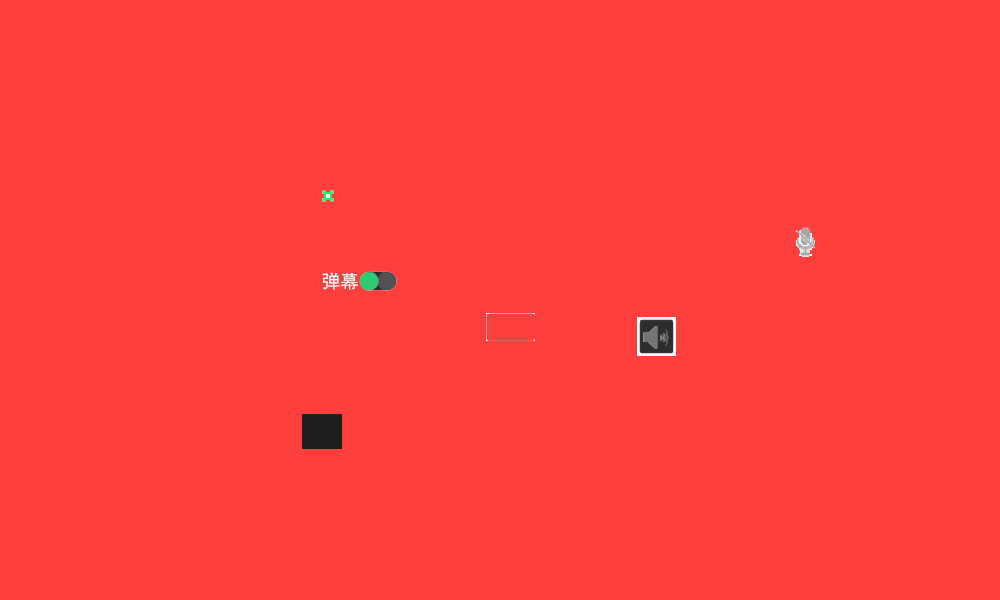
<style>
.page{position:relative;width:1000px;height:600px;background:#ff3e3e}
.page>*{position:absolute;margin:0}
.t1{font:18.7px "SimHei";color:#ffffff}
</style>
<div class="page">
<p class="t1" style="left:322px;top:272px;width:37px;height:18px">弹幕</p>
</div>
